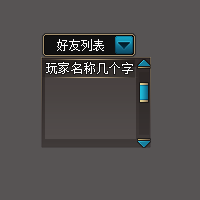
<style>
.page{position:relative;width:200px;height:200px;background:#575454}
.page>*{position:absolute;margin:0}
.t1{font:12px "SimSun";color:#ffffff}
.t2{font:12px "SimSun";letter-spacing:0.06em;color:#ffffff}
</style>
<div class="page">
<p class="t1" style="left:57px;top:39px;width:47px;height:12px">好友列表</p>
<p class="t2" style="left:46px;top:62px;width:87px;height:12px">玩家名称几个字</p>
</div>
